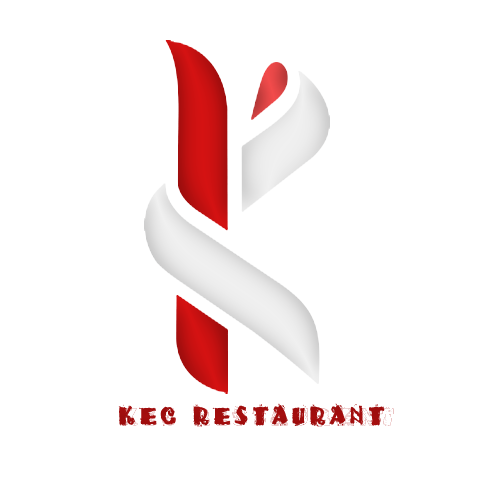
<style>
.page{position:relative;width:500px;height:500px;background:#ffffff}
.page>*{position:absolute;margin:0}
.t1{font:23.5px "TacoModern";letter-spacing:0.29em;color:#a00d0d;scale:0.75 1}
</style>
<div class="page">
<p class="t1" style="left:118px;top:403px;width:267px;height:24px">KEC RESTAURANT</p>
</div>
